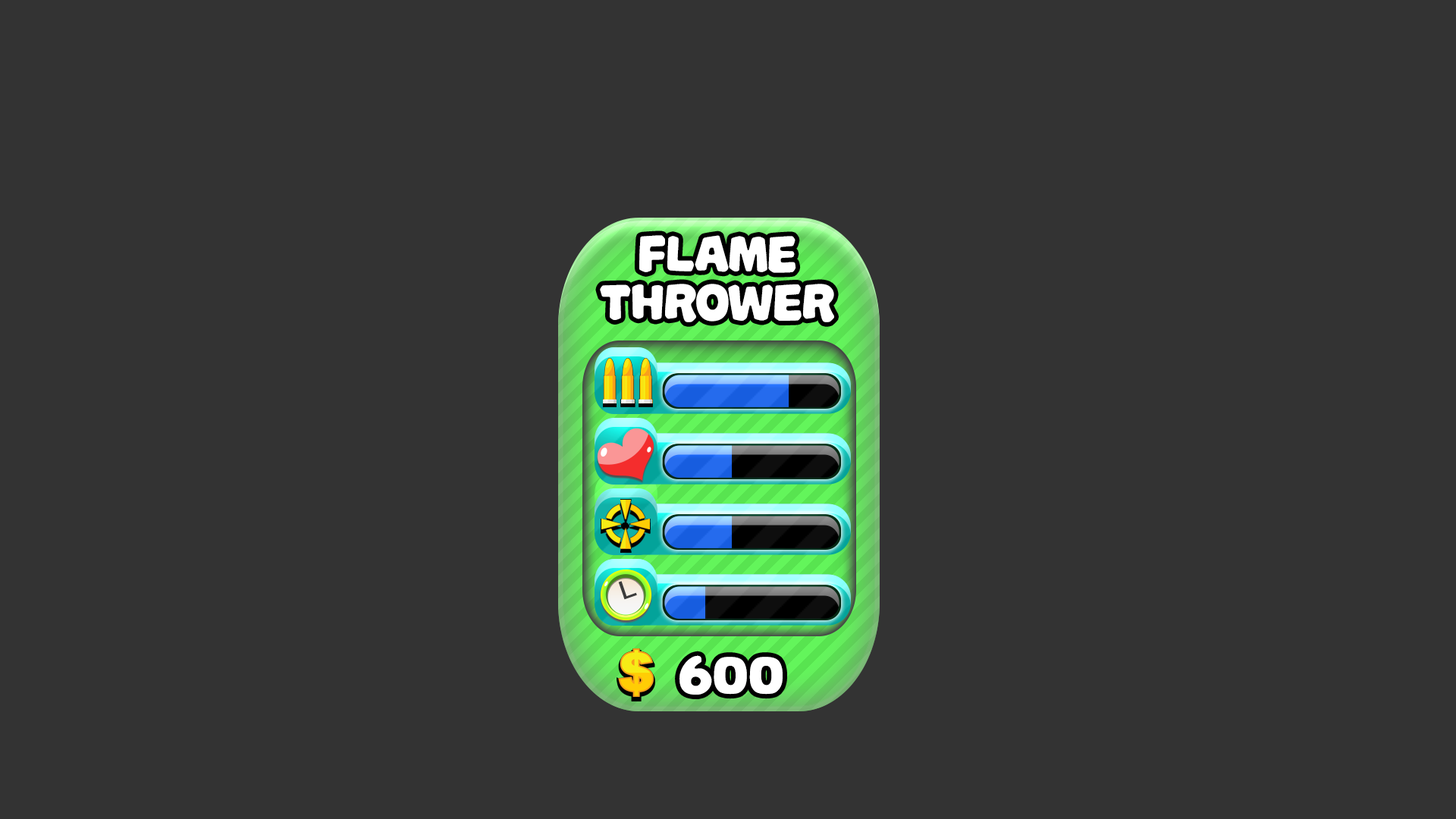
<style>
.page{position:relative;width:1456px;height:819px;background:#333333}
.page>*{position:absolute;margin:0}
.t1{font:54.9px/48.1px "PalameciaTitling-Regular";letter-spacing:-0.02em;color:#ffffff}
.t2{font:61.8px "PalameciaTitling-Regular";letter-spacing:-0.02em;color:#ffffff}
</style>
<div class="page">
<p class="t1" style="left:600px;top:235px;width:234px;height:87px;text-align:center">Flame<br>Thrower</p>
<p class="t2" style="left:679px;top:655px;width:104px;height:40px">600</p>
</div>
